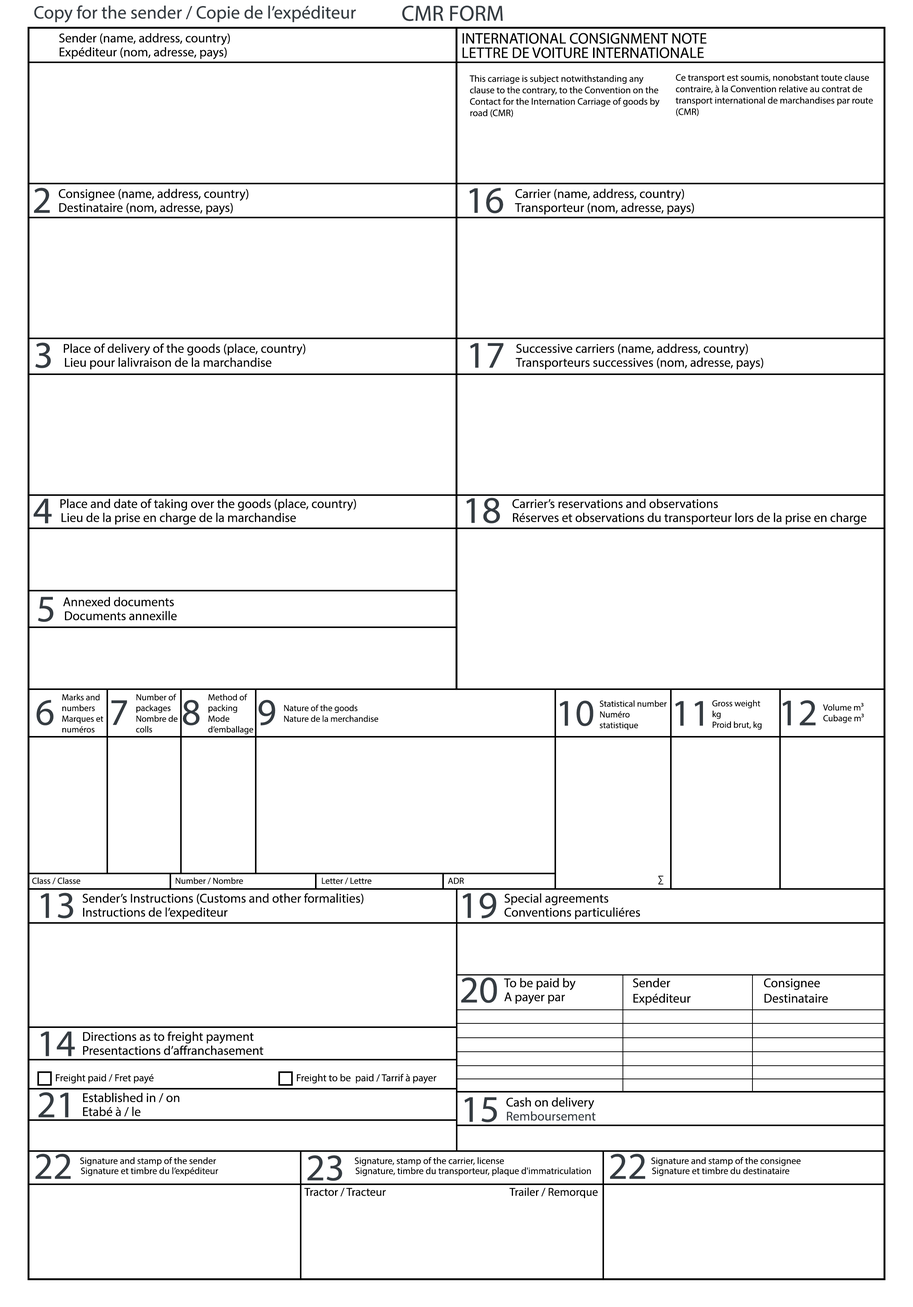
<style>
.page{position:relative;width:913px;height:1307px;background:#ffffff}
.page>*{position:absolute;margin:0}
.t1{font:18.2px "MyriadPro-Regular";color:#353c42}
.t2{font:22px "MyriadPro-Regular";color:#353c42}
.t3{font:12.8px "MyriadPro-Regular";color:#000000}
.t4{font:15.4px "MyriadPro-Regular";color:#000000}
.t5{font:9.5px "MyriadPro-Regular";color:#000000}
.t6{font:37.8px "MyriadPro-Regular";color:#353c42}
.t7{font:8.9px "MyriadPro-Regular";color:#000000}
.t8{font:10.3px "MyriadPro-Regular";color:#000000}
.t9{font:12.8px "MyriadPro-Regular";color:#353c42}
.t10{font:11.5px "MyriadPro-Regular";color:#000000}
</style>
<div class="page">
<p class="t1" style="left:34px;top:5px;width:322px;height:18px">Copy for the sender / Copie de l’expéditeur</p>
<p class="t2" style="left:402px;top:5px;width:101px;height:16px">CMR FORM</p>
<p class="t3" style="left:59px;top:33px;width:171px;height:12px">Sender (name, address, country)</p>
<p class="t4" style="left:462px;top:33px;width:244px;height:11px">INTERNATIONAL CONSIGNMENT NOTE</p>
<p class="t3" style="left:60px;top:47px;width:167px;height:12px">Expéditeur (nom, adresse, pays)</p>
<p class="t4" style="left:462px;top:47px;width:241px;height:11px">LETTRE DE VOITURE INTERNATIONALE</p>
<p class="t5" style="left:469px;top:75px;width:190px;height:42px">This carriage is subject notwithstanding any<br>clause to the contrary, to the Convention on the<br>Contact for the Internation Carriage of goods by<br>road (CMR)</p>
<p class="t5" style="left:675px;top:74px;width:198px;height:42px">Ce transport est soumis, nonobstant toute clause<br>contraire, à la Convention relative au contrat de <br>transport international de marchandises par route<br>(CMR)</p>
<p class="t6" style="left:34px;top:188px;width:16px;height:25px">2</p>
<p class="t3" style="left:59px;top:188px;width:189px;height:13px">Consignee (name, address, country)</p>
<p class="t6" style="left:469px;top:188px;width:34px;height:25px">16</p>
<p class="t3" style="left:515px;top:188px;width:169px;height:13px">Carrier (name, address, country)</p>
<p class="t3" style="left:59px;top:202px;width:174px;height:13px">Destinataire (nom, adresse, pays)</p>
<p class="t3" style="left:515px;top:202px;width:179px;height:13px">Transporteur (nom, adresse, pays)</p>
<p class="t6" style="left:35px;top:342px;width:16px;height:26px">3</p>
<p class="t3" style="left:64px;top:343px;width:241px;height:13px">Place of delivery of the goods (place, country)</p>
<p class="t6" style="left:470px;top:343px;width:33px;height:25px">17</p>
<p class="t3" style="left:516px;top:343px;width:232px;height:13px">Successive carriers (name, address, country)</p>
<p class="t3" style="left:65px;top:357px;width:206px;height:12px">Lieu pour lalivraison de la marchandise</p>
<p class="t3" style="left:515px;top:357px;width:248px;height:13px">Transporteurs successives (nom, adresse, pays)</p>
<p class="t6" style="left:466px;top:498px;width:34px;height:25px">18</p>
<p class="t6" style="left:34px;top:498px;width:18px;height:25px">4</p>
<p class="t3" style="left:60px;top:498px;width:296px;height:13px">Place and date of taking over the goods (place, country)</p>
<p class="t3" style="left:512px;top:498px;width:206px;height:10px">Carrier’s reservations and observations</p>
<p class="t3" style="left:62px;top:512px;width:234px;height:13px">Lieu de la prise en charge de la marchandise</p>
<p class="t3" style="left:513px;top:512px;width:353px;height:13px">Réserves et observations du transporteur lors de la prise en charge</p>
<p class="t6" style="left:38px;top:597px;width:16px;height:25px">5</p>
<p class="t3" style="left:63px;top:597px;width:111px;height:9px">Annexed documents</p>
<p class="t3" style="left:65px;top:611px;width:112px;height:9px">Documents annexille</p>
<p class="t6" style="left:36px;top:700px;width:18px;height:25px">6</p>
<p class="t7" style="left:62px;top:694px;width:41px;height:38px">Marks and<br>numbers<br>Marques et<br>numéros</p>
<p class="t6" style="left:111px;top:700px;width:16px;height:25px">7</p>
<p class="t7" style="left:136px;top:694px;width:41px;height:38px">Number of<br>packages<br>Nombre de<br>colls</p>
<p class="t6" style="left:183px;top:700px;width:17px;height:25px">8</p>
<p class="t7" style="left:208px;top:694px;width:45px;height:40px">Method of<br>packing<br>Mode<br>d’emballage</p>
<p class="t6" style="left:258px;top:700px;width:17px;height:25px">9</p>
<p class="t6" style="left:559px;top:700px;width:34px;height:26px">10</p>
<p class="t7" style="left:599px;top:700px;width:67px;height:30px">Statistical number<br>Numéro<br>statistique</p>
<p class="t6" style="left:675px;top:701px;width:28px;height:25px">11</p>
<p class="t7" style="left:712px;top:700px;width:49px;height:30px">Gross weight<br>kg<br>Proid brut, kg</p>
<p class="t6" style="left:782px;top:700px;width:33px;height:25px">12</p>
<p class="t7" style="left:284px;top:704px;width:94px;height:18px">Nature of the goods<br>Nature de la merchandise</p>
<p class="t7" style="left:823px;top:703px;width:40px;height:20px">Volume m³<br>Cubage m³</p>
<p class="t7" style="left:32px;top:877px;width:48px;height:7px">Class / Classe</p>
<p class="t7" style="left:176px;top:877px;width:67px;height:7px">Number / Nombre</p>
<p class="t7" style="left:322px;top:877px;width:50px;height:7px">Letter / Lettre</p>
<p class="t7" style="left:448px;top:877px;width:16px;height:7px">ADR</p>
<p class="t6" style="left:40px;top:893px;width:33px;height:25px">13</p>
<p class="t3" style="left:82px;top:893px;width:281px;height:11px">Sender’s Instructions (Customs and other formalities)</p>
<p class="t6" style="left:462px;top:893px;width:34px;height:25px">19</p>
<p class="t3" style="left:504px;top:893px;width:104px;height:12px">Special agreements</p>
<p class="t3" style="left:83px;top:907px;width:145px;height:12px">Instructions de l’expediteur</p>
<p class="t3" style="left:504px;top:907px;width:136px;height:12px">Conventions particuliéres</p>
<p class="t6" style="left:461px;top:977px;width:36px;height:26px">20</p>
<p class="t3" style="left:504px;top:977px;width:71px;height:13px">To be paid by</p>
<p class="t3" style="left:632px;top:977px;width:58px;height:28px">Sender<br>Expéditeur</p>
<p class="t3" style="left:763px;top:978px;width:65px;height:25px">Consignee<br>Destinataire</p>
<p class="t3" style="left:504px;top:992px;width:61px;height:12px">A payer par</p>
<p class="t6" style="left:40px;top:1031px;width:35px;height:25px">14</p>
<p class="t3" style="left:83px;top:1031px;width:171px;height:13px">Directions as to freight payment</p>
<p class="t3" style="left:83px;top:1045px;width:180px;height:10px">Presentactions d’affranchasement</p>
<p class="t8" style="left:56px;top:1073px;width:98px;height:11px">Freight paid / Fret payé</p>
<p class="t8" style="left:297px;top:1073px;width:139px;height:11px">Freight to be  paid / Tarrif à payer</p>
<p class="t6" style="left:39px;top:1092px;width:29px;height:25px">21</p>
<p class="t3" style="left:83px;top:1092px;width:96px;height:10px">Established in / on</p>
<p class="t6" style="left:464px;top:1097px;width:33px;height:25px">15</p>
<p class="t3" style="left:506px;top:1097px;width:88px;height:12px">Cash on delivery</p>
<p class="t3" style="left:83px;top:1106px;width:57px;height:10px">Etabé à / le</p>
<p class="t9" style="left:507px;top:1111px;width:88px;height:10px">Remboursement</p>
<p class="t6" style="left:35px;top:1153px;width:36px;height:26px">22</p>
<p class="t5" style="left:80px;top:1157px;width:136px;height:9px">Signature and stamp of the sender</p>
<p class="t6" style="left:307px;top:1155px;width:35px;height:26px">23</p>
<p class="t5" style="left:355px;top:1157px;width:149px;height:9px">Signature, stamp of the carrier, license</p>
<p class="t6" style="left:610px;top:1153px;width:35px;height:26px">22</p>
<p class="t5" style="left:651px;top:1157px;width:149px;height:9px">Signature and stamp of the consignee</p>
<p class="t5" style="left:81px;top:1167px;width:137px;height:9px">Signature et timbre du l’expéditeur</p>
<p class="t5" style="left:355px;top:1167px;width:236px;height:9px">Signature, timbre du transporteur, plaque d'immatriculation</p>
<p class="t5" style="left:652px;top:1167px;width:137px;height:9px">Signature et timbre du destinataire</p>
<p class="t10" style="left:304px;top:1187px;width:82px;height:9px">Tractor / Tracteur</p>
<p class="t10" style="left:509px;top:1187px;width:89px;height:11px">Trailer / Remorque</p>
</div>
